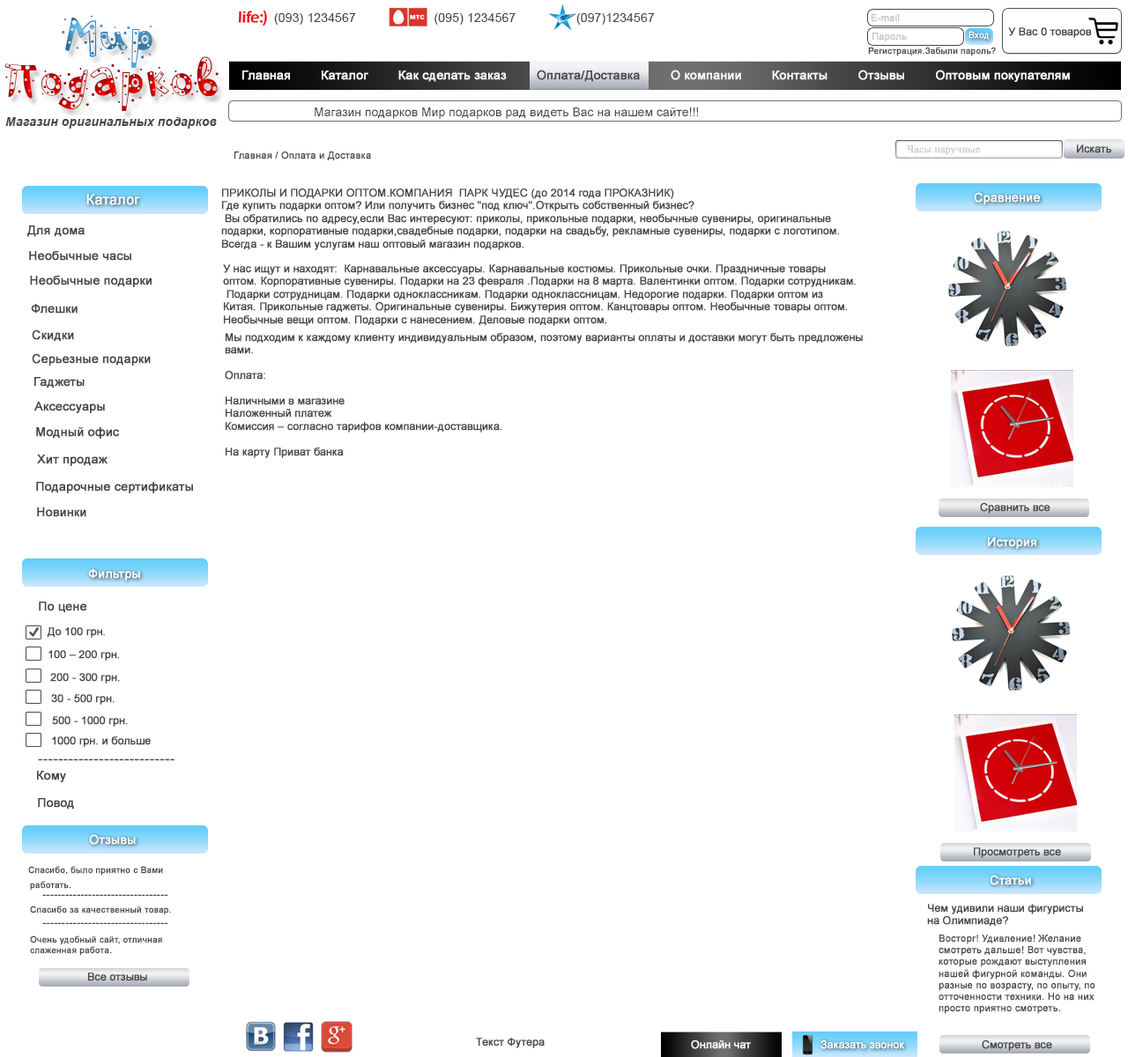
<style>
.page{position:relative;width:1128px;height:1057px;background:#ffffff}
.page>*{position:absolute;margin:0}
.t1{font:70.5px "PFPlayskoolPro-Confetti";letter-spacing:0.01em}
.t2{font:63.4px "PFPlayskoolPro-Confetti";letter-spacing:0.01em}
.t3{font:12.3px "ArialMT";letter-spacing:0.01em;color:#474747}
.t4{font:9.7px "ArialMT";color:#c1c1c1;font-weight:bold}
.t5{font:10.6px "ArialMT";color:#474747;font-weight:bold}
.t6{font:8.8px "ArialMT";color:#ffffff;font-weight:bold}
.t7{font:8.8px "ArialMT";color:#474747;font-weight:bold}
.t8{font:12.3px "ArialMT";color:#ffffff;font-weight:bold}
.t9{font:12.3px "ArialMT";color:#474747;font-weight:bold}
.t10{font:12.3px "ArialMT";color:#474747}
.t11{font:12.3px "Arial-BoldItalicMT";letter-spacing:0.01em;color:#474747}
.t12{font:10.6px "TimesNewRomanPSMT";color:#cecfd3;font-weight:bold}
.t13{font:9.7px "ArialMT";color:#474747;font-weight:bold}
.t14{font:14.1px "ArialMT";color:#ffffff;font-weight:bold}
.t15{font:10.6px "ArialMT";color:#011138;font-weight:bold}
.t16{font:14.1px "TimesNewRomanPSMT";color:#474747;font-weight:bold}
.t17{font:10.6px "TimesNewRomanPSMT";color:#474747;font-weight:bold}
.t18{font:10.6px "ArialMT";color:#ffffff;font-weight:bold}
</style>
<div class="page">
<p class="t1" style="left:62px;top:16px;width:90px;height:52px"><span class="t2">  </span> Мир</p>
<p class="t3" style="left:274px;top:13px;width:381px;height:12px">(093) 1234567                      (095) 1234567                 (097)1234567</p>
<p class="t4" style="left:871px;top:14px;width:29px;height:8px">E-mail</p>
<p class="t5" style="left:1008px;top:27px;width:84px;height:11px">У Вас 0 товаров</p>
<p class="t4" style="left:872px;top:33px;width:35px;height:9px">Пароль</p>
<p class="t6" style="left:968px;top:31px;width:21px;height:9px">Вход</p>
<p class="t7" style="left:868px;top:47px;width:128px;height:9px">Регистрация.Забыли пароль?</p>
<p class="t1" style="left:4px;top:56px;width:215px;height:55px">Подарков</p>
<p class="t8" style="left:242px;top:70px;width:828px;height:12px">Главная        Каталог        Как сделать заказ        <span class="t9">Оплата/Доставка </span>       О компании        Контакты        Отзывы        Оптовым покупателям</p>
<p class="t10" style="left:315px;top:107px;width:383px;height:12px">Магазин подарков Мир подарков рад видеть Вас на нашем сайте!!!</p>
<p class="t11" style="left:5px;top:117px;width:212px;height:12px">Магазин оригинальных подарков</p>
<p class="t12" style="left:906px;top:145px;width:74px;height:10px">Часы наручные</p>
<p class="t5" style="left:1077px;top:144px;width:34px;height:9px">Искать</p>
<p class="t13" style="left:234px;top:152px;width:137px;height:8px">Главная / Оплата и Доставка</p>
<p class="t14" style="left:86px;top:194px;width:54px;height:11px">Каталог</p>
<p class="t5" style="left:221px;top:189px;width:618px;height:61px">ПРИКОЛЫ И ПОДАРКИ ОПТОМ.КОМПАНИЯ  ПАРК ЧУДЕС (до 2014 года ПРОКАЗНИК)<br>Где купить подарки оптом? Или получить бизнес "под ключ".Открыть собственный бизнес?                 <br> Вы обратились по адресу,если Вас интересуют: приколы, прикольные подарки, необычные сувениры, оригинальные <br>подарки, корпоративные подарки,свадебные подарки, подарки на свадьбу, рекламные сувениры, подарки с логотипом.   <br>Всегда - к Вашим услугам наш оптовый магазин подарков.</p>
<p class="t8" style="left:974px;top:192px;width:66px;height:12px">Сравнение</p>
<p class="t9" style="left:27px;top:226px;width:58px;height:11px">Для дома</p>
<p class="t9" style="left:29px;top:250px;width:102px;height:11px">Необычные часы</p>
<p class="t5" style="left:223px;top:264px;width:633px;height:62px">У нас ищут и находят:  Карнавальные аксессуары. Карнавальные костюмы. Прикольные очки. Праздничные товары <br>оптом. Корпоративные сувениры. Подарки на 23 февраля .Подарки на 8 марта. Валентинки оптом. Подарки сотрудникам.<br> Подарки сотрудницам. Подарки одноклассникам. Подарки одноклассницам. Недорогие подарки. Подарки оптом из <br>Китая. Прикольные гаджеты. Оригинальные сувениры. Бижутерия оптом. Канцтовары оптом. Необычные товары оптом. <br>Необычные вещи оптом. Подарки с нанесением. Деловые подарки оптом<span class="t15">.</span></p>
<p class="t9" style="left:30px;top:275px;width:122px;height:12px">Необычные подарки</p>
<p class="t9" style="left:31px;top:304px;width:47px;height:10px">Флешки</p>
<p class="t9" style="left:32px;top:330px;width:42px;height:12px">Скидки</p>
<p class="t5" style="left:225px;top:333px;width:638px;height:125px">Мы подходим к каждому клиенту индивидуальным образом, поэтому варианты оплаты и доставки могут быть предложены <br>вами.<br> <br>Оплата:<br> <br>Наличными в магазине<br>Наложенный платеж<br>Комиссия – согласно тарифов компании-доставщика.<br> <br>На карту Приват банка</p>
<p class="t9" style="left:32px;top:353px;width:119px;height:13px">Серьезные подарки</p>
<p class="t9" style="left:34px;top:377px;width:51px;height:12px">Гаджеты</p>
<p class="t9" style="left:34px;top:402px;width:71px;height:11px">Аксессуары</p>
<p class="t9" style="left:36px;top:426px;width:84px;height:13px">Модный офис</p>
<p class="t9" style="left:37px;top:455px;width:70px;height:11px">Хит продаж</p>
<p class="t9" style="left:36px;top:482px;width:157px;height:11px">Подарочные сертификаты</p>
<p class="t9" style="left:37px;top:508px;width:49px;height:9px">Новинки</p>
<p class="t5" style="left:980px;top:503px;width:70px;height:11px">Сравнить все</p>
<p class="t8" style="left:988px;top:537px;width:48px;height:12px">История</p>
<p class="t8" style="left:88px;top:569px;width:52px;height:12px">Фильтры</p>
<p class="t9" style="left:39px;top:602px;width:48px;height:11px">По цене</p>
<p class="t5" style="left:47px;top:627px;width:58px;height:11px">До 100 грн.</p>
<p class="t5" style="left:48px;top:650px;width:71px;height:11px">100 – 200 грн.</p>
<p class="t5" style="left:50px;top:673px;width:70px;height:11px">200 - 300 грн.</p>
<p class="t5" style="left:51px;top:694px;width:64px;height:11px">30 - 500 грн.</p>
<p class="t5" style="left:52px;top:716px;width:76px;height:11px">500 - 1000 грн.</p>
<p class="t5" style="left:52px;top:737px;width:99px;height:10px">1000 грн. и больше</p>
<p class="t16" style="left:38px;top:759px;width:136px;height:2px">---------------------------</p>
<p class="t9" style="left:37px;top:771px;width:29px;height:11px">Кому</p>
<p class="t9" style="left:38px;top:798px;width:36px;height:12px">Повод</p>
<p class="t8" style="left:89px;top:834px;width:47px;height:11px">Отзывы</p>
<p class="t5" style="left:974px;top:848px;width:87px;height:10px">Просмотреть все</p>
<p class="t7" style="left:28px;top:866px;width:135px;height:10px">Спасибо, было приятно с Вами</p>
<p class="t7" style="left:30px;top:881px;width:41px;height:10px">работать.</p>
<p class="t8" style="left:989px;top:875px;width:42px;height:10px">Статьи</p>
<p class="t7" style="left:30px;top:906px;width:141px;height:9px">Спасибо за качественный товар.</p>
<p class="t17" style="left:42px;top:894px;width:126px;height:2px">---------------------------------</p>
<p class="t5" style="left:927px;top:904px;width:156px;height:22px">Чем удивили наши фигуристы<br>на Олимпиаде?</p>
<p class="t17" style="left:42px;top:923px;width:126px;height:1px">---------------------------------</p>
<p class="t7" style="left:30px;top:936px;width:132px;height:20px">Очень удобный сайт, отличная <br>слаженная работа.</p>
<p class="t13" style="left:938px;top:935px;width:157px;height:79px">Восторг! Удивление! Желание <br>смотреть дальше! Вот чувства, <br>которые рождают выступления <br>нашей фигурной команды. Они <br>разные по возрасту, по опыту, по <br>отточенности техники. Но на них <br>просто приятно смотреть.</p>
<p class="t5" style="left:88px;top:973px;width:59px;height:9px">Все отзывы</p>
<p class="t5" style="left:476px;top:1038px;width:69px;height:10px">Текст Футера</p>
<p class="t18" style="left:691px;top:1041px;width:60px;height:8px">Онлайн чат</p>
<p class="t18" style="left:820px;top:1041px;width:84px;height:8px">Заказать звонок</p>
<p class="t5" style="left:982px;top:1041px;width:70px;height:10px">Смотреть все</p>
</div>
